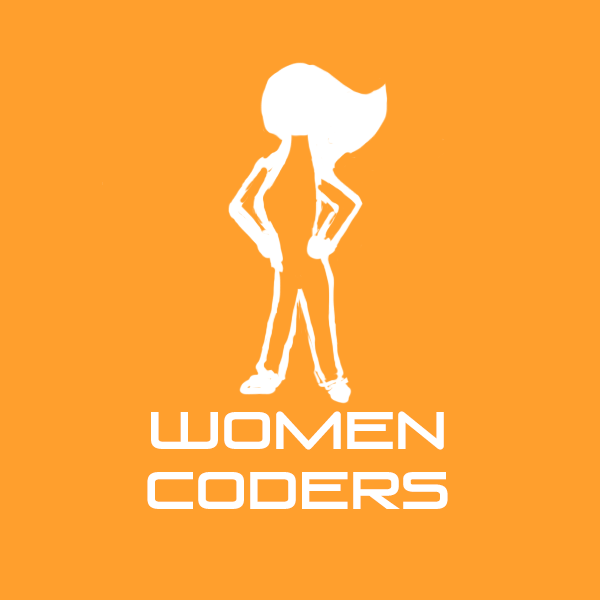
<style>
.page{position:relative;width:600px;height:600px;background:#ff9f2d}
.page>*{position:absolute;margin:0}
.t1{font:12px "VenusRising-Regular";color:#ffffff}
</style>
<div class="page">
<p class="t1" style="left:147px;top:411px;width:301px;height:98px;text-align:center">Women Coders</p>
</div>
